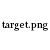
<style>
.page{position:relative;width:50px;height:50px;background:#ffffff}
.page>*{position:absolute;margin:0}
.t1{font:10px "ToppanBunkyuMinchoPr6N-Regular";color:#000000}
</style>
<div class="page">
<p class="t1" style="left:2px;top:21px;width:46px;height:10px">target.png</p>
</div>
